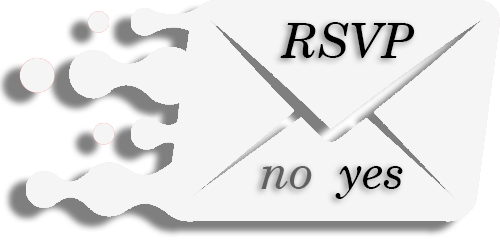
<style>
.page{position:relative;width:500px;height:240px;background:#f5f5f5}
.page>*{position:absolute;margin:0}
.t1{font:48px "CenturySchlbkCyrillicBT-Italic";color:#000000}
.t2{font:48px "CenturySchlbkCyrillicBT-Italic";color:#606060}
</style>
<div class="page">
<p class="t1" style="left:280px;top:22px;width:135px;height:36px">RSVP</p>
<p class="t1" style="left:261px;top:166px;width:142px;height:33px"><span class="t2">no  </span>yes</p>
</div>
